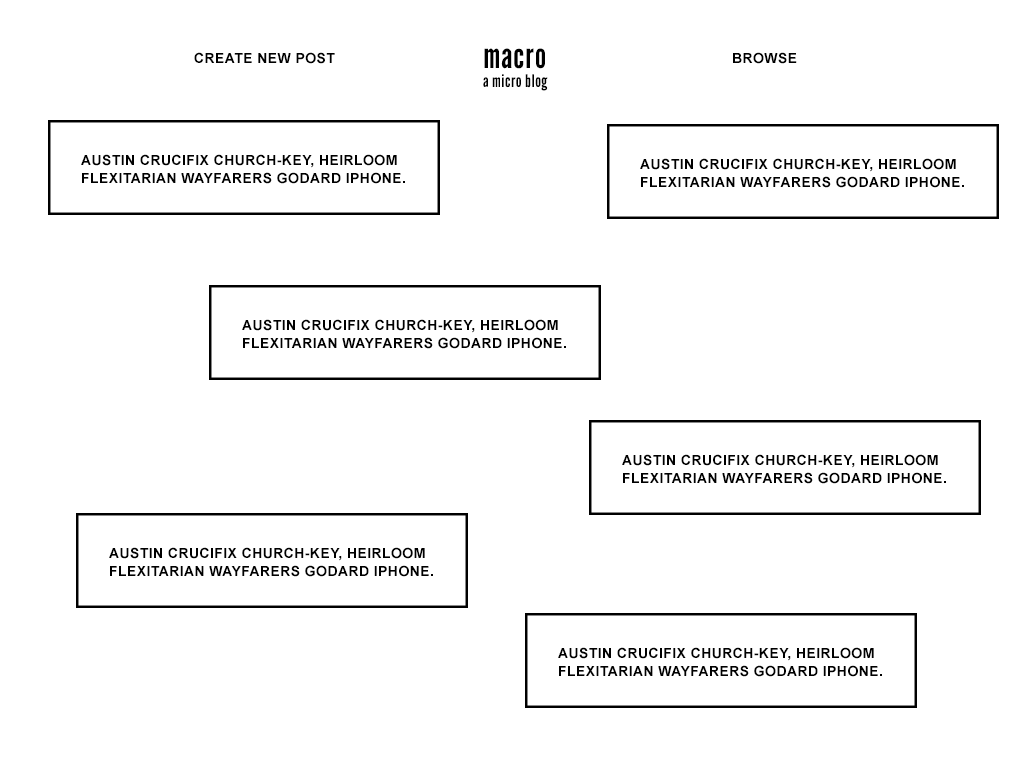
<style>
.page{position:relative;width:1024px;height:768px;background:#ffffff}
.page>*{position:absolute;margin:0}
.t1{font:24px "Arial-BoldMT";letter-spacing:0.03em;color:#000000;text-transform:uppercase}
.t2{font:60px "LeagueGothic-Regular";letter-spacing:0.03em;color:#000000}
.t3{font:30px "LeagueGothic-Regular";letter-spacing:0.03em;color:#000000}
</style>
<div class="page">
<p class="t1" style="left:194px;top:52px;width:141px;height:12px">create new post</p>
<p class="t2" style="left:484px;top:48px;width:61px;height:21px">macro</p>
<p class="t1" style="left:733px;top:52px;width:64px;height:12px">BROWSe</p>
<p class="t3" style="left:483px;top:74px;width:65px;height:17px">a micro blog</p>
<p class="t1" style="left:81px;top:154px;width:324px;height:30px">Austin crucifix church-key, heirloom flexitarian wayfarers Godard iPhone.</p>
<p class="t1" style="left:640px;top:158px;width:324px;height:30px">Austin crucifix church-key, heirloom flexitarian wayfarers Godard iPhone.</p>
<p class="t1" style="left:242px;top:319px;width:324px;height:30px">Austin crucifix church-key, heirloom flexitarian wayfarers Godard iPhone.</p>
<p class="t1" style="left:622px;top:454px;width:324px;height:30px">Austin crucifix church-key, heirloom flexitarian wayfarers Godard iPhone.</p>
<p class="t1" style="left:109px;top:547px;width:324px;height:30px">Austin crucifix church-key, heirloom flexitarian wayfarers Godard iPhone.</p>
<p class="t1" style="left:558px;top:647px;width:324px;height:30px">Austin crucifix church-key, heirloom flexitarian wayfarers Godard iPhone.</p>
</div>
